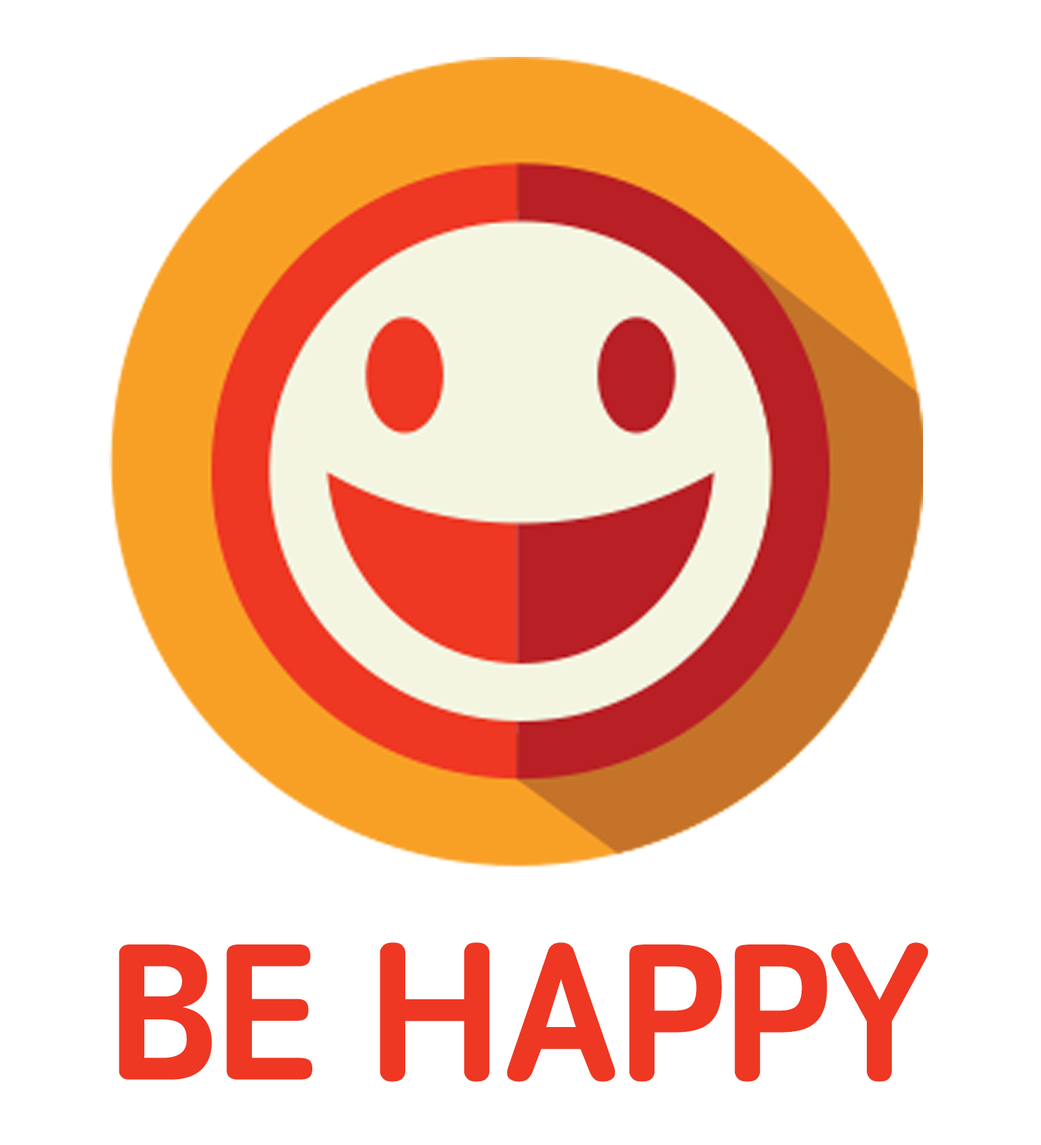
<style>
.page{position:relative;width:1041px;height:1145px;background:#ffffff}
.page>*{position:absolute;margin:0}
.t1{font:193.8px "STYuanti-SC-Bold";color:#ee3823}
</style>
<div class="page">
<p class="t1" style="left:119px;top:943px;width:810px;height:139px">BE HAPPY</p>
</div>
